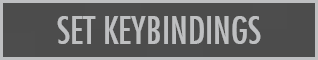
<style>
.page{position:relative;width:318px;height:60px;background:#4c4c4c}
.page>*{position:absolute;margin:0}
.t1{font:37.3px "FuturaCondensed";color:#bebfc1}
</style>
<div class="page">
<p class="t1" style="left:57px;top:16px;width:204px;height:28px">SET KEYBINDINGS</p>
</div>
